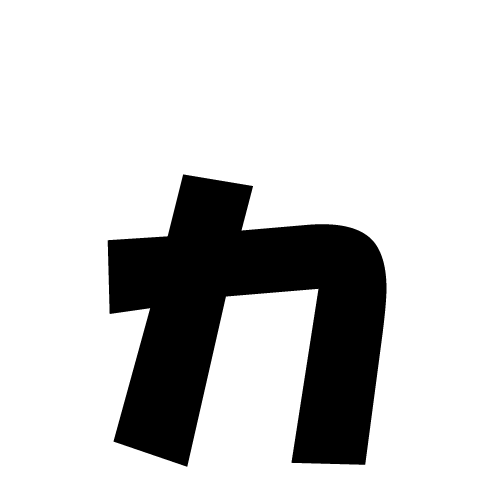
<style>
.page{position:relative;width:500px;height:500px;background:#ffffff}
.page>*{position:absolute;margin:0}
.t1{font:495.1px "HGSSoeiKakupoptai";color:#000000}
</style>
<div class="page">
<p class="t1" style="left:107px;top:174px;width:280px;height:293px">ヵ</p>
</div>
